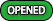
<style>
.page{position:relative;width:53px;height:21px}
.page>*{position:absolute;margin:0}
.t1{font:10px "AdobeHeitiStd-Regular";color:#ffffff}
</style>
<div class="page">
<p class="t1" style="left:7px;top:6px;width:39px;height:9px">OPENED</p>
</div>
